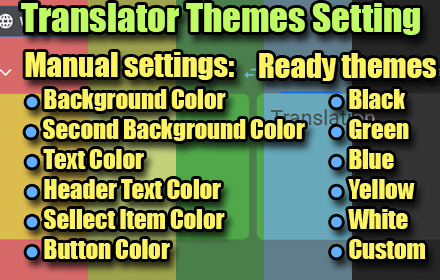
<style>
.page{position:relative;width:440px;height:280px}
.page>*{position:absolute;margin:0}
.t1{font:36.9px "Impact";color:#c1fb64}
.t2{font:30.8px "Impact";color:#fbf264}
.t3{font:24.6px "Impact";color:#fbf264}
.t4{font:24.6px "Impact";color:#64affb}
</style>
<div class="page">
<p class="t1" style="left:21px;top:3px;width:399px;height:32px">Translator Themes Setting</p>
<p class="t2" style="left:25px;top:52px;width:209px;height:28px">Manual settings:</p>
<p class="t2" style="left:259px;top:53px;width:177px;height:28px">Ready themes</p>
<p class="t3" style="left:26px;top:89px;width:200px;height:22px"><span class="t4">●</span> Background Color</p>
<p class="t3" style="left:331px;top:89px;width:74px;height:20px"><span class="t4">●</span> Black</p>
<p class="t3" style="left:25px;top:119px;width:280px;height:22px"><span class="t4">●</span> Second Background Color</p>
<p class="t3" style="left:331px;top:119px;width:78px;height:20px"><span class="t4">●</span> Green</p>
<p class="t3" style="left:26px;top:149px;width:118px;height:20px"><span class="t4">●</span> Text Color</p>
<p class="t3" style="left:331px;top:149px;width:63px;height:20px"><span class="t4">●</span> Blue</p>
<p class="t3" style="left:26px;top:179px;width:195px;height:20px"><span class="t4">●</span> Header Text Color</p>
<p class="t3" style="left:331px;top:179px;width:84px;height:20px"><span class="t4">●</span> Yellow</p>
<p class="t3" style="left:26px;top:209px;width:199px;height:20px"><span class="t4">●</span> Sellect Item Color</p>
<p class="t3" style="left:331px;top:209px;width:77px;height:20px"><span class="t4">●</span> White</p>
<p class="t3" style="left:26px;top:239px;width:144px;height:20px"><span class="t4">●</span> Button Color</p>
<p class="t3" style="left:331px;top:239px;width:94px;height:20px"><span class="t4">●</span> Custom</p>
</div>
